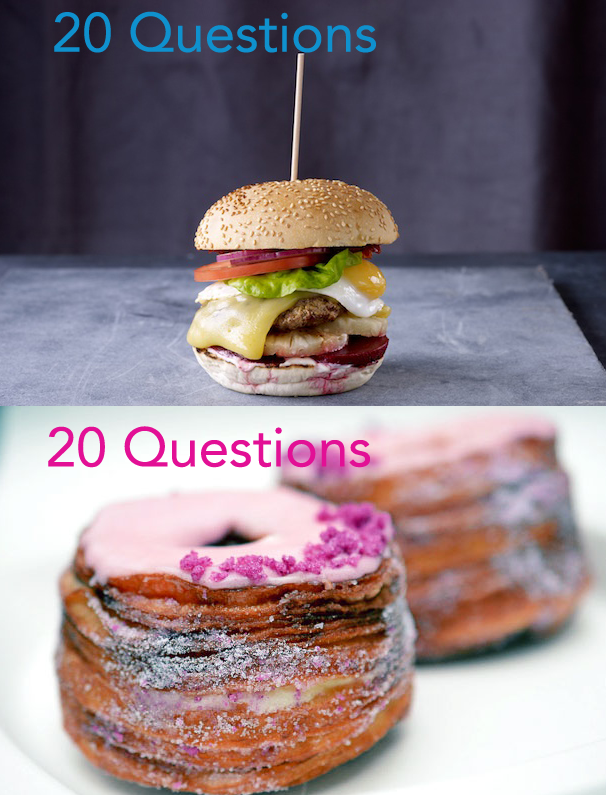
<style>
.page{position:relative;width:606px;height:795px}
.page>*{position:absolute;margin:0}
.t1{font:55px "Avenir-Roman";color:#e21095}
</style>
<div class="page">
<p class="t1" style="left:48px;top:426px;width:322px;height:42px">20 Questions</p>
</div>
